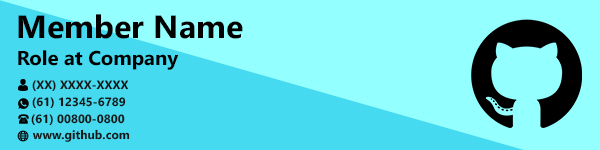
<style>
.page{position:relative;width:600px;height:150px;background:#93fffe}
.page>*{position:absolute;margin:0}
.t1{font:32px "SegoeUI-Bold";color:#000000}
.t2{font:20px "SegoeUI-Bold";color:#000000}
.t3{font:12px "SegoeUI-Bold";color:#171717}
</style>
<div class="page">
<p class="t1" style="left:18px;top:14px;width:225px;height:25px">Member Name</p>
<p class="t2" style="left:18px;top:50px;width:161px;height:20px">Role at Company</p>
<p class="t3" style="left:32px;top:80px;width:97px;height:12px">(XX) XXXX-XXXX</p>
<p class="t3" style="left:32px;top:97px;width:94px;height:12px">(61) 12345-6789</p>
<p class="t3" style="left:31px;top:114px;width:94px;height:12px">(61) 00800-0800</p>
<p class="t3" style="left:32px;top:129px;width:98px;height:13px">www.github.com</p>
</div>
